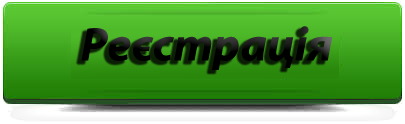
<style>
.page{position:relative;width:405px;height:124px}
.page>*{position:absolute;margin:0}
.t1{font:48px "MyriadPro-BoldIt";color:#000000}
</style>
<div class="page">
<p class="t1" style="left:81px;top:26px;width:252px;height:44px">Реєстрація</p>
</div>
